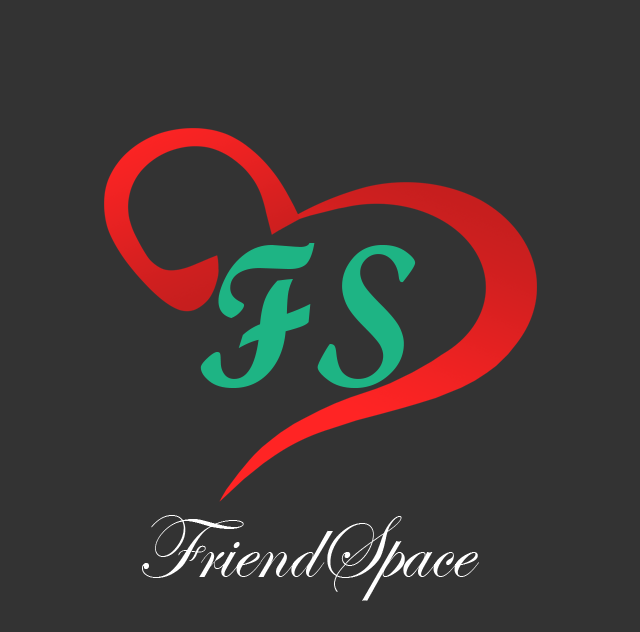
<style>
.page{position:relative;width:640px;height:632px;background:#333333}
.page>*{position:absolute;margin:0}
.t1{font:203.2px "ScriptMTBold";color:#1eb484;scale:0.96 1}
.t2{font:90.8px "EdwardianScriptITC";color:#ffffff;scale:0.94 1}
</style>
<div class="page">
<p class="t1" style="left:200px;top:243px;width:216px;height:145px">FS</p>
<p class="t2" style="left:142px;top:515px;width:337px;height:86px">FriendSpace</p>
</div>
